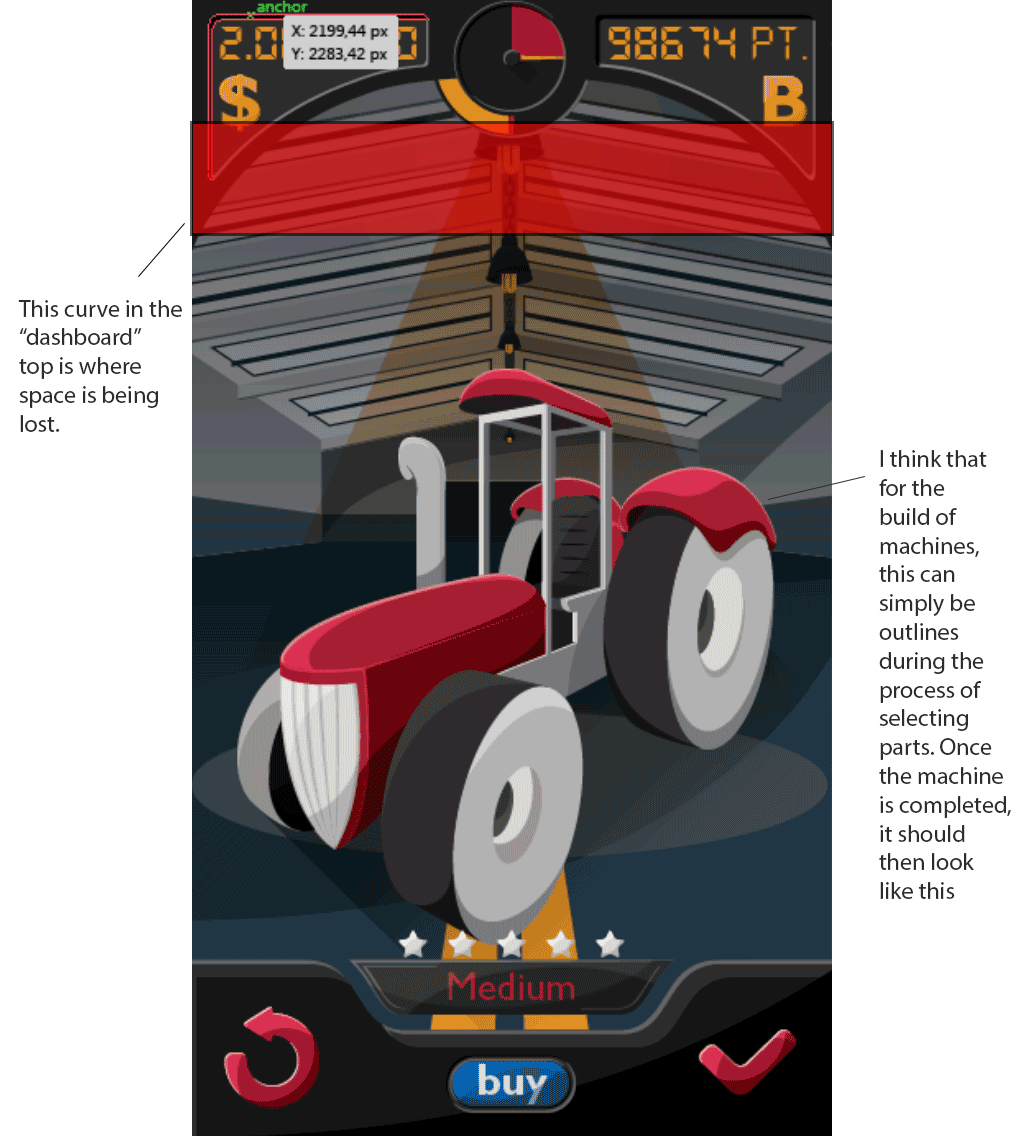
<style>
.page{position:relative;width:1024px;height:1136px;background:#ffffff}
.page>*{position:absolute;margin:0}
.t1{font:24px "MyriadPro-Regular";color:#2c2c2c}
</style>
<div class="page">
<p class="t1" style="left:18px;top:300px;width:164px;height:132px">This curve in the<br>“dashboard”<br>top is where<br>space is being<br>lost.</p>
<p class="t1" style="left:879px;top:450px;width:132px;height:449px">I think that<br>for the <br>build of<br>machines,<br>this can<br>simply be<br>outlines<br>during the<br>process of<br>selecting<br>parts. Once<br>the machine<br>is completed,<br>it should <br>then look<br>like this</p>
</div>
